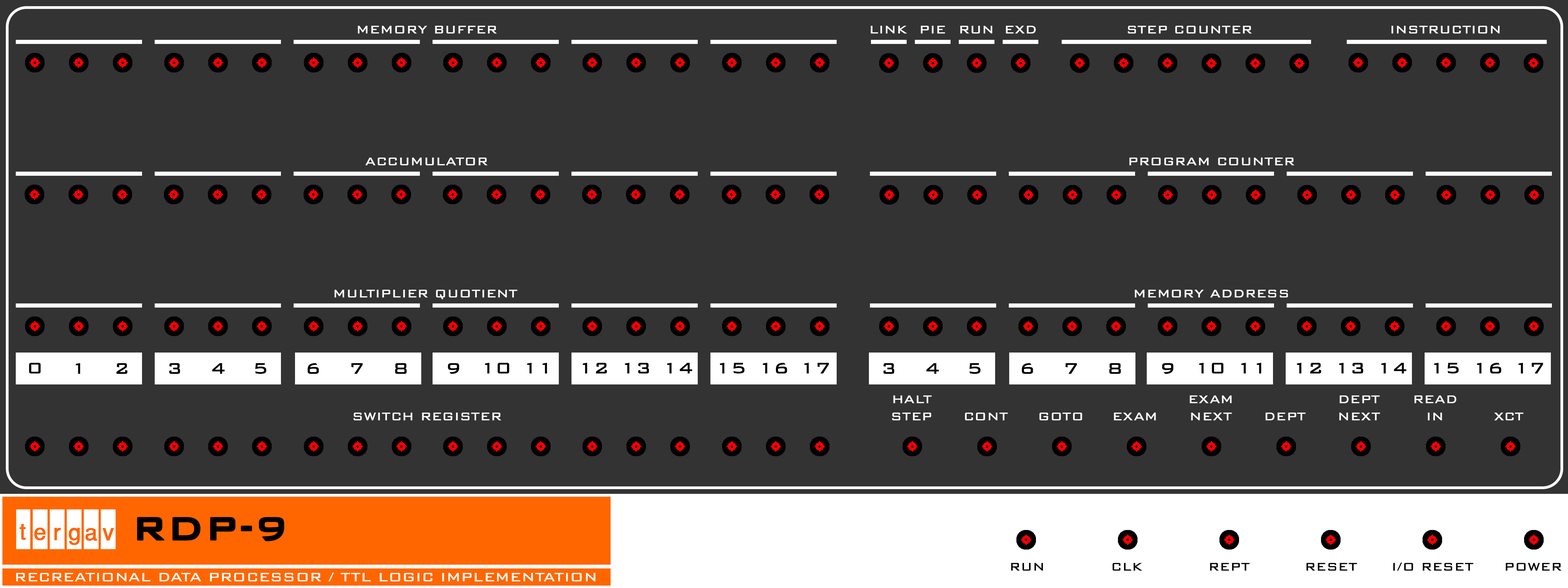
<style>
.page{position:relative;width:1568px;height:588px;background:#333333}
.page>*{position:absolute;margin:0}
.t1{font:14.3px "BankGothicBT-Light";letter-spacing:0.003em;color:#ffffff;font-weight:bold}
.t2{font:20px "BankGothicBT-Light";letter-spacing:0.003em;color:#000000;font-weight:bold}
.t3{font:42.9px "BankGothicBT-Medium";color:#000000;font-weight:bold}
.t4{font:14.3px "BankGothicBT-Light";letter-spacing:0.003em;color:#000000;font-weight:bold}
.t5{font:15.7px "BankGothicBT-Light";letter-spacing:0.003em;color:#ffffff;font-weight:bold}
</style>
<div class="page">
<p class="t1" style="left:358px;top:26px;width:139px;height:8px">MEMORY BUFFER</p>
<p class="t1" style="left:871px;top:26px;width:36px;height:8px">LINK</p>
<p class="t1" style="left:921px;top:26px;width:24px;height:8px">PIE</p>
<p class="t1" style="left:960px;top:26px;width:32px;height:8px">RUN</p>
<p class="t1" style="left:1006px;top:26px;width:30px;height:8px">EXD</p>
<p class="t1" style="left:1128px;top:26px;width:124px;height:8px">STEP COUNTER</p>
<p class="t1" style="left:1391px;top:26px;width:109px;height:8px">INSTRUCTION</p>
<p class="t1" style="left:365px;top:157px;width:122px;height:8px">ACCUMULATOR</p>
<p class="t1" style="left:1129px;top:157px;width:165px;height:8px">PROGRAM COUNTER</p>
<p class="t1" style="left:334px;top:290px;width:183px;height:9px">MULTIPLIER QUOTIENT</p>
<p class="t1" style="left:1135px;top:290px;width:153px;height:7px">MEMORY ADDRESS</p>
<p class="t2" style="left:29px;top:363px;width:12px;height:10px">0</p>
<p class="t2" style="left:75px;top:363px;width:5px;height:11px">1</p>
<p class="t2" style="left:116px;top:363px;width:12px;height:11px">2</p>
<p class="t2" style="left:169px;top:363px;width:11px;height:11px">3</p>
<p class="t2" style="left:212px;top:363px;width:13px;height:11px">4</p>
<p class="t2" style="left:255px;top:363px;width:12px;height:11px">5</p>
<p class="t2" style="left:307px;top:363px;width:12px;height:11px">6</p>
<p class="t2" style="left:351px;top:363px;width:12px;height:11px">7</p>
<p class="t2" style="left:395px;top:363px;width:12px;height:11px">8</p>
<p class="t2" style="left:448px;top:363px;width:11px;height:11px">9</p>
<p class="t2" style="left:485px;top:363px;width:24px;height:10px">10</p>
<p class="t2" style="left:527px;top:363px;width:20px;height:10px">11</p>
<p class="t2" style="left:582px;top:363px;width:25px;height:10px">12</p>
<p class="t2" style="left:625px;top:363px;width:24px;height:10px">13</p>
<p class="t2" style="left:667px;top:363px;width:25px;height:10px">14</p>
<p class="t2" style="left:720px;top:363px;width:25px;height:10px">15</p>
<p class="t2" style="left:763px;top:363px;width:24px;height:10px">16</p>
<p class="t2" style="left:804px;top:363px;width:25px;height:10px">17</p>
<p class="t1" style="left:892px;top:395px;width:40px;height:25px;text-align:center">HALT<br>STEP</p>
<p class="t1" style="left:1190px;top:395px;width:42px;height:25px;text-align:center">EXAM<br>NEXT</p>
<p class="t1" style="left:1339px;top:395px;width:41px;height:25px;text-align:center">DEPT<br>NEXT</p>
<p class="t1" style="left:1414px;top:395px;width:43px;height:25px;text-align:center">READ<br>IN</p>
<p class="t1" style="left:353px;top:412px;width:148px;height:8px">SWITCH REGISTER</p>
<p class="t1" style="left:965px;top:412px;width:43px;height:8px">CONT</p>
<p class="t1" style="left:1039px;top:412px;width:43px;height:8px">GOTO</p>
<p class="t1" style="left:1114px;top:412px;width:42px;height:8px">EXAM</p>
<p class="t1" style="left:1265px;top:412px;width:41px;height:8px">DEPT</p>
<p class="t1" style="left:1494px;top:412px;width:29px;height:8px">XCT</p>
<p class="t3" style="left:137px;top:517px;width:147px;height:24px">RDP-9</p>
<p class="t4" style="left:1011px;top:563px;width:32px;height:7px">RUN</p>
<p class="t4" style="left:1112px;top:563px;width:30px;height:7px">CLK</p>
<p class="t4" style="left:1210px;top:563px;width:40px;height:7px">REPT</p>
<p class="t4" style="left:1306px;top:563px;width:51px;height:7px">RESET</p>
<p class="t4" style="left:1393px;top:562px;width:80px;height:8px">I/O RESET</p>
<p class="t4" style="left:1506px;top:563px;width:55px;height:7px">POWER</p>
<p class="t5" style="left:16px;top:572px;width:580px;height:9px">RECREATIONAL DATA PROCESSOR / TTL LOGIC IMPLEMENTATION</p>
</div>
